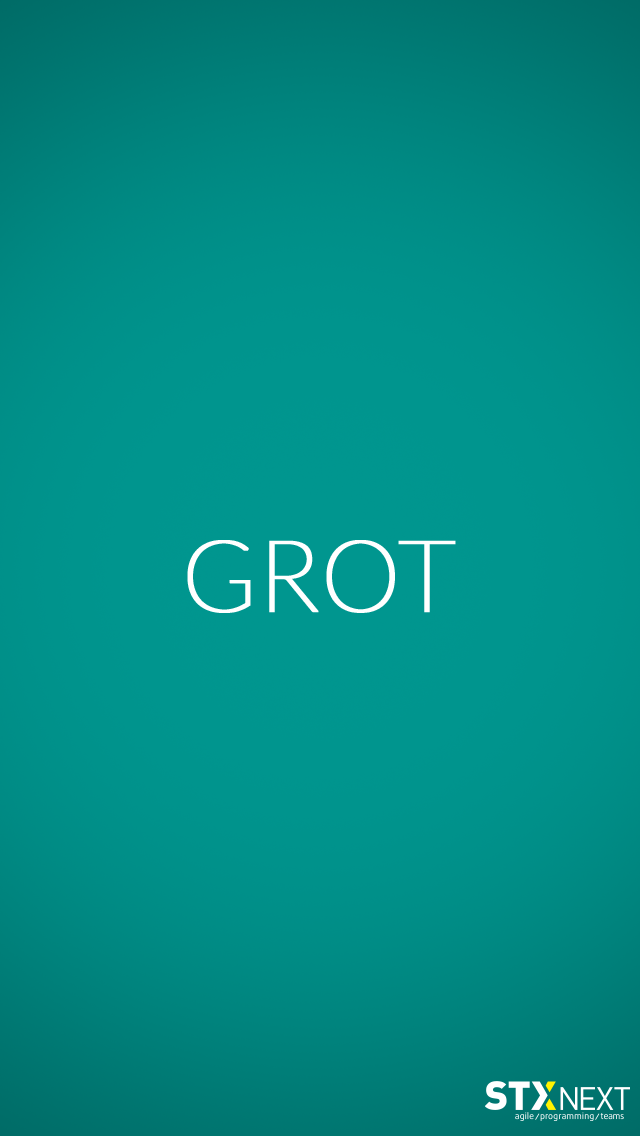
<style>
.page{position:relative;width:640px;height:1136px}
.page>*{position:absolute;margin:0}
.t1{font:100px "Lato-Thin";color:#ffffff;font-weight:bold}
</style>
<div class="page">
<p class="t1" style="left:187px;top:540px;width:269px;height:73px">GROT</p>
</div>
